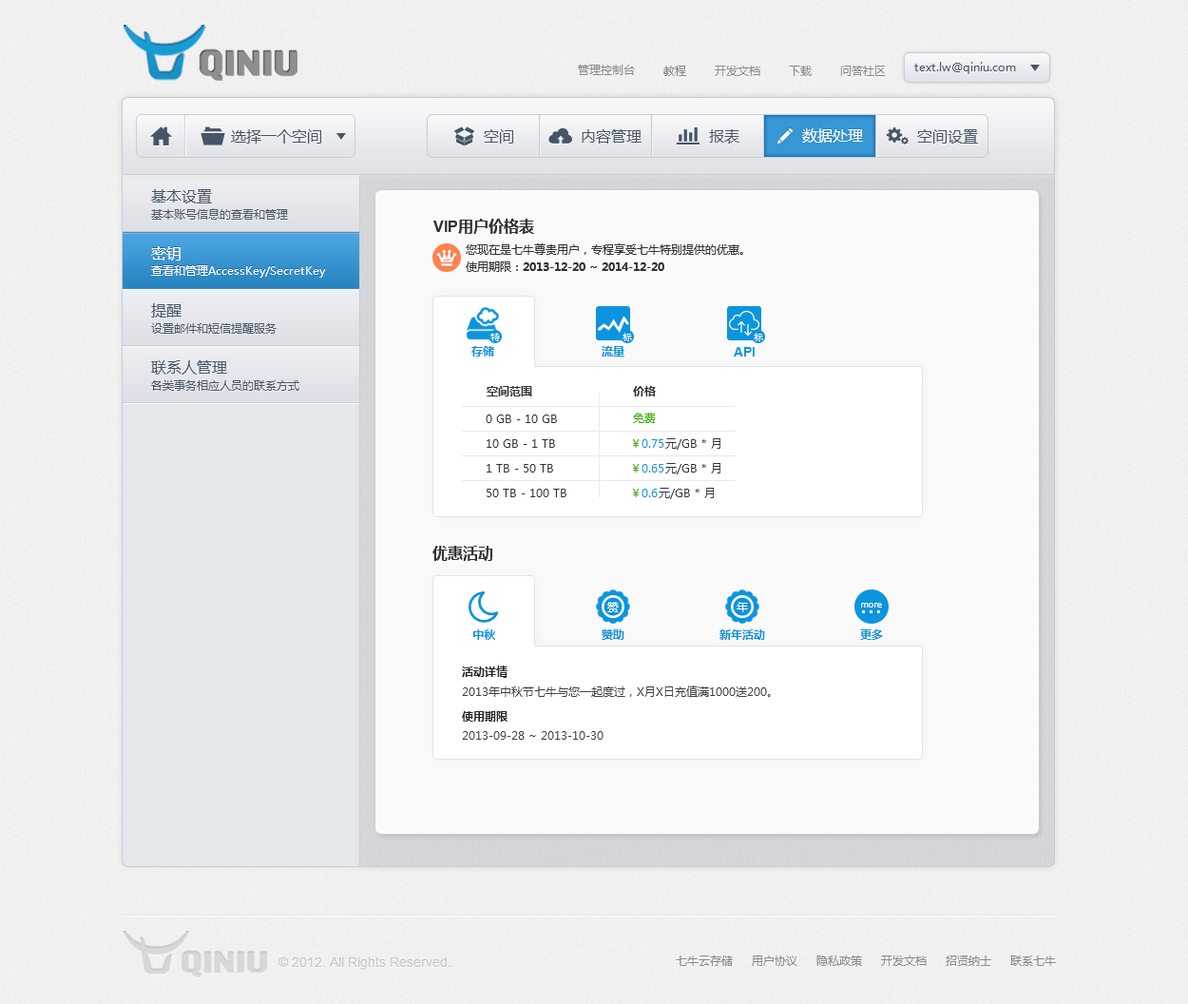
<style>
.page{position:relative;width:1188px;height:1004px;background:#fafafa}
.page>*{position:absolute;margin:0}
.t1{font:11.4px "MicrosoftYaHei";color:#969696}
.t2{font:11.4px "MicrosoftYaHei";color:#465567}
.t3{font:15.2px "MicrosoftYaHei";color:#465567}
.t4{font:15.2px "MicrosoftYaHei";color:#ffffff}
.t5{font:15.2px "MicrosoftYaHei-Bold";color:#323232}
.t6{font:15.2px "Arial-BoldMT";color:#323232}
.t7{font:11.4px "MicrosoftYaHei";color:#323232}
.t8{font:11.4px "MicrosoftYaHei";color:#ffffff}
.t9{font:11.4px "MicrosoftYaHei-Bold";color:#323232}
.t10{font:9.5px "SimHei";color:#ffffff}
.t11{font:11.4px "MicrosoftYaHei-Bold";color:#0c94de}
.t12{font:13.3px "Arial-BoldMT";color:#0c94de}
.t13{font:11.4px "MicrosoftYaHei";color:#39ac00}
.t14{font:11.4px "MicrosoftYaHei";color:#0c94de}
.t15{font:9.5px "ArialMT";color:#fefefe}
.t16{font:11.4px "MicrosoftYaHei-Bold";color:#262626}
.t17{font:11.4px "MicrosoftYaHei";color:#404040}
.t18{font:13.3px "ArialMT";color:#c5c5c5}
.t19{font:11.4px "MicrosoftYaHei";color:#878787}
</style>
<div class="page">
<p class="t1" style="left:578px;top:65px;width:57px;height:10px">管理控制台</p>
<p class="t1" style="left:663px;top:66px;width:23px;height:10px">教程</p>
<p class="t1" style="left:715px;top:66px;width:45px;height:10px">开发文档</p>
<p class="t1" style="left:789px;top:66px;width:23px;height:10px">下载</p>
<p class="t1" style="left:840px;top:66px;width:46px;height:10px">问答社区</p>
<p class="t2" style="left:914px;top:62px;width:102px;height:12px">text.lw@qiniu.com</p>
<p class="t3" style="left:231px;top:129px;width:90px;height:15px">选择一个空间</p>
<p class="t3" style="left:484px;top:129px;width:29px;height:15px">空间</p>
<p class="t3" style="left:582px;top:129px;width:60px;height:15px">内容管理</p>
<p class="t3" style="left:709px;top:129px;width:30px;height:15px">报表</p>
<p class="t4" style="left:802px;top:128px;width:61px;height:15px">数据处理</p>
<p class="t3" style="left:917px;top:129px;width:61px;height:15px">空间设置</p>
<p class="t3" style="left:151px;top:189px;width:61px;height:14px">基本设置</p>
<p class="t2" style="left:151px;top:208px;width:137px;height:12px">基本账号信息的查看和管理</p>
<p class="t5" style="left:433px;top:219px;width:101px;height:15px"><span class="t6">VIP</span>用户价格表</p>
<p class="t7" style="left:466px;top:243px;width:277px;height:12px">您现在是七牛尊贵用户，专程享受七牛特别提供的优惠。</p>
<p class="t4" style="left:151px;top:246px;width:30px;height:14px">密钥</p>
<p class="t8" style="left:151px;top:265px;width:175px;height:13px">查看和管理AccessKey/SecretKey</p>
<p class="t9" style="left:466px;top:261px;width:198px;height:11px"><span class="t7">使用期限：</span>2013-12-20 ~ 2014-12-20</p>
<p class="t3" style="left:151px;top:303px;width:31px;height:14px">提醒</p>
<p class="t2" style="left:151px;top:323px;width:126px;height:11px">设置邮件和短信提醒服务</p>
<p class="t10" style="left:490px;top:333px;width:10px;height:8px">特</p>
<p class="t10" style="left:623px;top:333px;width:9px;height:8px">标</p>
<p class="t10" style="left:754px;top:333px;width:9px;height:8px">标</p>
<p class="t11" style="left:471px;top:346px;width:23px;height:10px">存储</p>
<p class="t11" style="left:602px;top:346px;width:22px;height:10px">流量</p>
<p class="t12" style="left:734px;top:347px;width:21px;height:9px">API</p>
<p class="t3" style="left:151px;top:360px;width:76px;height:14px">联系人管理</p>
<p class="t2" style="left:151px;top:379px;width:148px;height:12px">各类事务相应人员的联系方式</p>
<p class="t9" style="left:487px;top:386px;width:45px;height:10px">空间范围</p>
<p class="t9" style="left:633px;top:386px;width:23px;height:10px">价格</p>
<p class="t13" style="left:633px;top:412px;width:23px;height:11px">免费</p>
<p class="t7" style="left:486px;top:414px;width:71px;height:9px">0 GB - 10 GB</p>
<p class="t7" style="left:487px;top:439px;width:68px;height:9px">10 GB - 1 TB</p>
<p class="t14" style="left:632px;top:439px;width:32px;height:9px"><span class="t13">￥</span>0.75</p>
<p class="t7" style="left:665px;top:438px;width:55px;height:12px">元/GB * 月</p>
<p class="t7" style="left:487px;top:464px;width:66px;height:8px">1 TB - 50 TB</p>
<p class="t14" style="left:632px;top:464px;width:32px;height:8px"><span class="t13">￥</span>0.65</p>
<p class="t7" style="left:665px;top:463px;width:55px;height:11px">元/GB * 月</p>
<p class="t7" style="left:487px;top:489px;width:79px;height:8px">50 TB - 100 TB</p>
<p class="t14" style="left:632px;top:489px;width:26px;height:8px"><span class="t13">￥</span>0.6</p>
<p class="t7" style="left:659px;top:488px;width:55px;height:11px">元/GB * 月</p>
<p class="t5" style="left:432px;top:546px;width:61px;height:15px">优惠活动</p>
<p class="t8" style="left:607px;top:602px;width:12px;height:10px">赞</p>
<p class="t8" style="left:737px;top:602px;width:11px;height:10px">年</p>
<p class="t15" style="left:861px;top:603px;width:21px;height:4px">more</p>
<p class="t11" style="left:473px;top:629px;width:22px;height:11px">中秋</p>
<p class="t11" style="left:602px;top:629px;width:22px;height:11px">赞助</p>
<p class="t11" style="left:719px;top:629px;width:46px;height:11px">新年活动</p>
<p class="t11" style="left:860px;top:629px;width:23px;height:11px">更多</p>
<p class="t16" style="left:462px;top:665px;width:46px;height:13px">活动详情</p>
<p class="t17" style="left:462px;top:685px;width:309px;height:12px">2013年中秋节七牛与您一起度过，X月X日充值满1000送200。</p>
<p class="t16" style="left:462px;top:711px;width:46px;height:10px">使用期限</p>
<p class="t17" style="left:462px;top:731px;width:142px;height:8px">2013-09-28 ~ 2013-10-30</p>
<p class="t18" style="left:278px;top:957px;width:173px;height:12px">© 2012. All Rights Reserved.</p>
<p class="t19" style="left:676px;top:955px;width:380px;height:12px">七牛云存储     用户协议     隐私政策     开发文档     招贤纳士     联系七牛</p>
</div>
